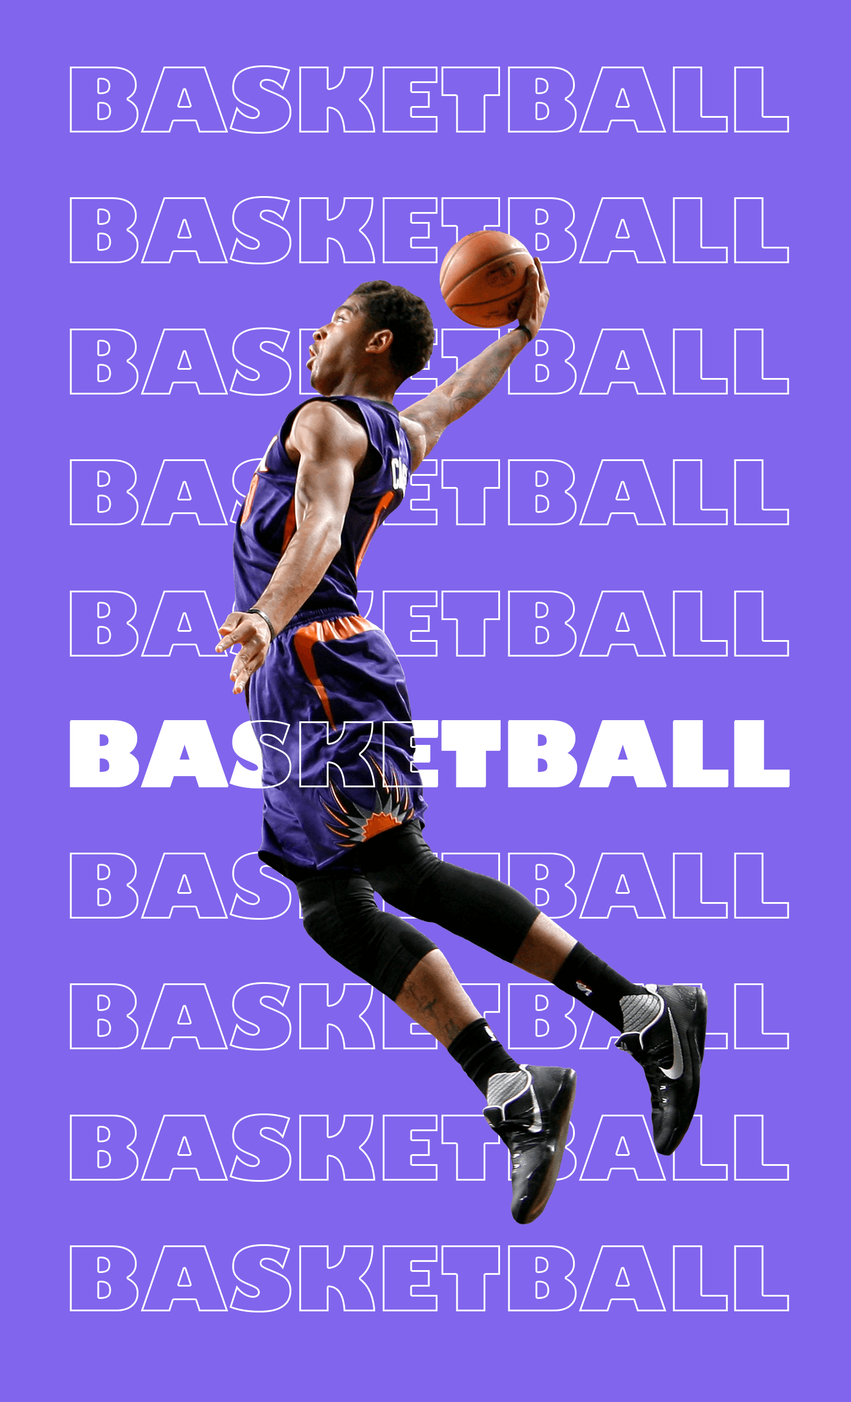
<style>
.page{position:relative;width:851px;height:1402px;background:#8165ec}
.page>*{position:absolute;margin:0}
.t1{font:88.3px "GillSans-UltraBold";color:#ffffff}
</style>
<div class="page">
<p class="t1" style="left:69px;top:720px;width:720px;height:68px">BASKETBALL</p>
<p class="t1" style="left:70px;top:719px;width:719px;height:68px">BASKETBALL</p>
</div>
